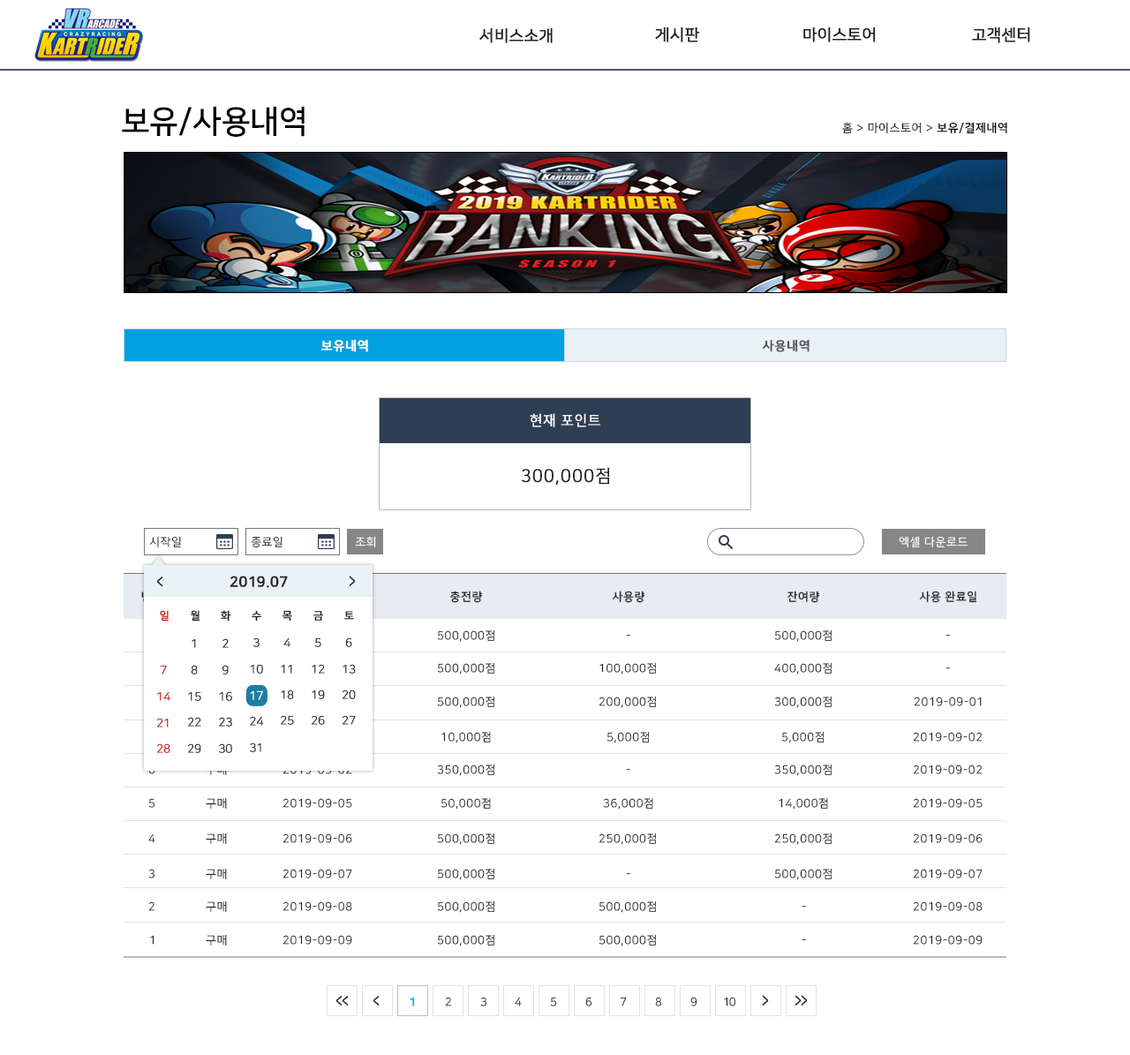
<style>
.page{position:relative;width:1130px;height:1055px;background:#ffffff}
.page>*{position:absolute;margin:0}
.t1{font:15.9px "NanumSquareR";color:#222222;font-weight:bold}
.t2{font:31.8px "NanumSquareB";color:#000000}
.t3{font:11.5px "NanumSquareR";letter-spacing:0.05em;color:#000000}
.t4{font:11.5px "NanumSquareB";letter-spacing:0.05em;color:#000000}
.t5{font:12.4px "NanumSquareB";letter-spacing:0.05em;color:#ffffff;font-weight:bold}
.t6{font:12.4px "NanumSquareB";letter-spacing:0.05em;color:#555555;font-weight:bold}
.t7{font:14.1px "NanumSquareR";letter-spacing:0.04em;color:#fffefe;text-transform:uppercase;font-weight:bold}
.t8{font:17.7px "NanumSquareR";letter-spacing:0.04em;color:#222222;text-transform:uppercase;font-weight:bold}
.t9{font:11.5px "NanumSquareR";letter-spacing:0.05em;color:#222222}
.t10{font:11.5px "NanumSquareR";letter-spacing:0.05em;color:#ffffff}
.t11{font:18.3px "NanumSquareB";letter-spacing:-0.075em;color:#222222;scale:0.62 1}
.t12{font:14.2px "NanumSquareB";color:#222222;font-weight:bold}
.t13{font:18.7px "NanumSquareB";letter-spacing:-0.075em;color:#222222;scale:0.61 1}
.t14{font:11.5px "NanumSquareB";letter-spacing:0.05em;color:#222222}
.t15{font:10.6px "NanumSquareR";color:#cc0000;font-weight:bold}
.t16{font:10.6px "NanumSquareR";color:#222222;font-weight:bold}
.t17{font:11.4px/26.4px "NanumSquareL";color:#222222;font-weight:bold}
.t18{font:11.4px/26.2px "NanumSquareL";color:#222222;font-weight:bold}
.t19{font:11.3px/26px "NanumSquareL";color:#222222;font-weight:bold}
.t20{font:11.4px/26px "NanumSquareL";color:#222222;font-weight:bold}
.t21{font:11.3px/25.9px "NanumSquareL";color:#222222;font-weight:bold}
.t22{font:11.5px "NanumSquareR";letter-spacing:0.05em}
.t23{font:11.5px/26.4px "NanumSquareL";color:#cc0000;font-weight:bold}
.t24{font:18.1px "NanumSquareB";letter-spacing:-0.075em;color:#222222;scale:0.63 1}
.t25{font:11.5px "NanumSquareB";letter-spacing:-0.075em;color:#00b6ff;font-weight:bold}
.t26{font:11.5px "NanumSquareR";letter-spacing:-0.075em}
.t27{font:11.5px "NanumSquareR";letter-spacing:-0.075em;color:#222222}
</style>
<div class="page">
<p class="t1" style="left:479px;top:27px;width:74px;height:16px">서비스소개</p>
<p class="t1" style="left:655px;top:26px;width:45px;height:16px">게시판</p>
<p class="t1" style="left:803px;top:26px;width:73px;height:16px">마이스토어</p>
<p class="t1" style="left:972px;top:26px;width:58px;height:16px">고객센터</p>
<p class="t2" style="left:122px;top:106px;width:183px;height:31px">보유/사용내역</p>
<p class="t3" style="left:842px;top:122px;width:165px;height:12px">홈 &gt; 마이스토어 &gt; <span class="t4">보유/결제내역</span></p>
<p class="t5" style="left:321px;top:339px;width:47px;height:13px">보유내역</p>
<p class="t6" style="left:762px;top:339px;width:48px;height:13px">사용내역</p>
<p class="t7" style="left:530px;top:413px;width:70px;height:14px">현재 포인트</p>
<p class="t8" style="left:522px;top:467px;width:87px;height:18px">300,000점</p>
<p class="t9" style="left:149px;top:536px;width:32px;height:11px">시작일</p>
<p class="t9" style="left:251px;top:536px;width:32px;height:12px">종료일</p>
<p class="t10" style="left:355px;top:536px;width:21px;height:11px">조회</p>
<p class="t10" style="left:899px;top:536px;width:70px;height:11px">엑셀 다운로드</p>
<p class="t11" style="left:156px;top:576px;width:7px;height:11px">&lt;</p>
<p class="t12" style="left:230px;top:576px;width:58px;height:12px">2019.07</p>
<p class="t13" style="left:349px;top:576px;width:7px;height:11px;rotate:180deg">&lt;</p>
<p class="t14" style="left:449px;top:591px;width:34px;height:12px">충전량</p>
<p class="t14" style="left:612px;top:591px;width:33px;height:12px">사용량</p>
<p class="t14" style="left:788px;top:591px;width:32px;height:12px">잔여량</p>
<p class="t14" style="left:919px;top:591px;width:58px;height:12px">사용 완료일</p>
<p class="t15" style="left:160px;top:610px;width:9px;height:12px">일</p>
<p class="t16" style="left:191px;top:610px;width:9px;height:12px">월</p>
<p class="t16" style="left:221px;top:610px;width:10px;height:12px">화</p>
<p class="t16" style="left:252px;top:610px;width:9px;height:12px">수</p>
<p class="t16" style="left:282px;top:610px;width:10px;height:12px">목</p>
<p class="t16" style="left:313px;top:611px;width:11px;height:10px">금</p>
<p class="t16" style="left:344px;top:611px;width:10px;height:9px">토</p>
<p class="t9" style="left:437px;top:630px;width:57px;height:12px">500,000점</p>
<p class="t9" style="left:774px;top:630px;width:58px;height:12px">500,000점</p>
<p class="t17" style="left:187px;top:638px;width:14px;height:115px;text-align:center">1<br>8<br>15<br>22<br>29</p>
<p class="t17" style="left:219px;top:638px;width:13px;height:115px;text-align:center">2<br>9<br>16<br>23<br>30</p>
<p class="t18" style="left:250px;top:637px;width:14px;height:115px;text-align:center">3<br>10<br>17<br>24<br>31</p>
<p class="t19" style="left:280px;top:637px;width:14px;height:88px;text-align:center">4<br>11<br>18<br>25</p>
<p class="t20" style="left:311px;top:637px;width:14px;height:88px;text-align:center">5<br>12<br>19<br>26</p>
<p class="t21" style="left:342px;top:637px;width:14px;height:88px;text-align:center">6<br>13<br>20<br>27</p>
<p class="t22" style="left:626px;top:635px;width:4px;height:2px">-</p>
<p class="t22" style="left:946px;top:635px;width:4px;height:2px">-</p>
<p class="t23" style="left:156px;top:665px;width:15px;height:88px;text-align:center">7<br>14<br>21<br>28</p>
<p class="t9" style="left:437px;top:662px;width:57px;height:13px">500,000점</p>
<p class="t9" style="left:600px;top:662px;width:56px;height:13px">100,000점</p>
<p class="t9" style="left:774px;top:662px;width:58px;height:13px">400,000점</p>
<p class="t22" style="left:946px;top:667px;width:4px;height:2px">-</p>
<p class="t9" style="left:437px;top:696px;width:57px;height:12px">500,000점</p>
<p class="t9" style="left:599px;top:696px;width:57px;height:12px">200,000점</p>
<p class="t9" style="left:774px;top:696px;width:58px;height:12px">300,000점</p>
<p class="t9" style="left:914px;top:697px;width:68px;height:9px">2019-09-01</p>
<p class="t9" style="left:441px;top:731px;width:50px;height:12px">10,000점</p>
<p class="t9" style="left:607px;top:731px;width:43px;height:12px">5,000점</p>
<p class="t9" style="left:781px;top:731px;width:44px;height:12px">5,000점</p>
<p class="t9" style="left:913px;top:732px;width:70px;height:10px">2019-09-02</p>
<p class="t22" style="left:148px;top:765px;width:7px;height:9px">6</p>
<p class="t10" style="left:283px;top:765px;width:69px;height:9px">2019-09-02</p>
<p class="t9" style="left:437px;top:764px;width:57px;height:12px">350,000점</p>
<p class="t22" style="left:626px;top:769px;width:4px;height:2px">-</p>
<p class="t9" style="left:774px;top:764px;width:58px;height:12px">350,000점</p>
<p class="t9" style="left:913px;top:765px;width:70px;height:9px">2019-09-02</p>
<p class="t9" style="left:206px;top:797px;width:21px;height:12px">구매</p>
<p class="t9" style="left:441px;top:797px;width:50px;height:13px">50,000점</p>
<p class="t9" style="left:603px;top:797px;width:50px;height:13px">36,000점</p>
<p class="t9" style="left:779px;top:797px;width:49px;height:13px">14,000점</p>
<p class="t22" style="left:148px;top:798px;width:7px;height:10px">5</p>
<p class="t9" style="left:283px;top:798px;width:69px;height:10px">2019-09-05</p>
<p class="t9" style="left:913px;top:798px;width:70px;height:10px">2019-09-05</p>
<p class="t22" style="left:148px;top:833px;width:7px;height:10px">4</p>
<p class="t9" style="left:206px;top:833px;width:21px;height:11px">구매</p>
<p class="t9" style="left:283px;top:833px;width:69px;height:10px">2019-09-06</p>
<p class="t9" style="left:437px;top:833px;width:57px;height:12px">500,000점</p>
<p class="t9" style="left:599px;top:833px;width:57px;height:12px">250,000점</p>
<p class="t9" style="left:774px;top:833px;width:58px;height:12px">250,000점</p>
<p class="t9" style="left:913px;top:833px;width:70px;height:10px">2019-09-06</p>
<p class="t9" style="left:148px;top:869px;width:7px;height:10px">3</p>
<p class="t9" style="left:206px;top:868px;width:21px;height:11px">구매</p>
<p class="t9" style="left:283px;top:869px;width:69px;height:10px">2019-09-07</p>
<p class="t9" style="left:437px;top:868px;width:57px;height:12px">500,000점</p>
<p class="t9" style="left:774px;top:868px;width:58px;height:12px">500,000점</p>
<p class="t9" style="left:913px;top:869px;width:70px;height:10px">2019-09-07</p>
<p class="t22" style="left:626px;top:873px;width:4px;height:2px">-</p>
<p class="t22" style="left:148px;top:901px;width:7px;height:10px">2</p>
<p class="t9" style="left:206px;top:901px;width:21px;height:11px">구매</p>
<p class="t9" style="left:283px;top:901px;width:69px;height:10px">2019-09-08</p>
<p class="t9" style="left:437px;top:901px;width:57px;height:12px">500,000점</p>
<p class="t9" style="left:599px;top:901px;width:57px;height:12px">500,000점</p>
<p class="t22" style="left:802px;top:906px;width:4px;height:2px">-</p>
<p class="t9" style="left:913px;top:901px;width:70px;height:10px">2019-09-08</p>
<p class="t9" style="left:150px;top:935px;width:5px;height:10px">1</p>
<p class="t9" style="left:206px;top:934px;width:21px;height:12px">구매</p>
<p class="t9" style="left:283px;top:935px;width:69px;height:10px">2019-09-09</p>
<p class="t9" style="left:437px;top:934px;width:57px;height:13px">500,000점</p>
<p class="t9" style="left:599px;top:934px;width:57px;height:13px">500,000점</p>
<p class="t22" style="left:802px;top:939px;width:4px;height:2px">-</p>
<p class="t9" style="left:913px;top:935px;width:70px;height:10px">2019-09-09</p>
<p class="t24" style="left:336px;top:995px;width:13px;height:12px">&lt;&lt;</p>
<p class="t24" style="left:373px;top:995px;width:7px;height:12px">&lt;</p>
<p class="t25" style="left:410px;top:997px;width:5px;height:10px">1</p>
<p class="t26" style="left:445px;top:997px;width:7px;height:10px">2</p>
<p class="t27" style="left:480px;top:997px;width:7px;height:10px">3</p>
<p class="t26" style="left:515px;top:997px;width:7px;height:10px">4</p>
<p class="t26" style="left:550px;top:997px;width:7px;height:10px">5</p>
<p class="t26" style="left:585px;top:997px;width:7px;height:10px">6</p>
<p class="t27" style="left:620px;top:997px;width:7px;height:10px">7</p>
<p class="t26" style="left:655px;top:997px;width:7px;height:10px">8</p>
<p class="t27" style="left:690px;top:997px;width:8px;height:10px">9</p>
<p class="t27" style="left:724px;top:997px;width:11px;height:10px">10</p>
<p class="t13" style="left:762px;top:995px;width:7px;height:12px;rotate:180deg">&lt;</p>
<p class="t13" style="left:795px;top:995px;width:13px;height:12px;rotate:180deg">&lt;&lt;</p>
</div>
